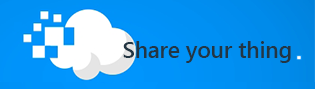
<style>
.page{position:relative;width:315px;height:89px}
.page>*{position:absolute;margin:0}
.t1{font:22.5px "SegoeUI-Semibold";color:#233643}
</style>
<div class="page">
<p class="t1" style="left:123px;top:41px;width:168px;height:22px">Share your thing</p>
</div>
